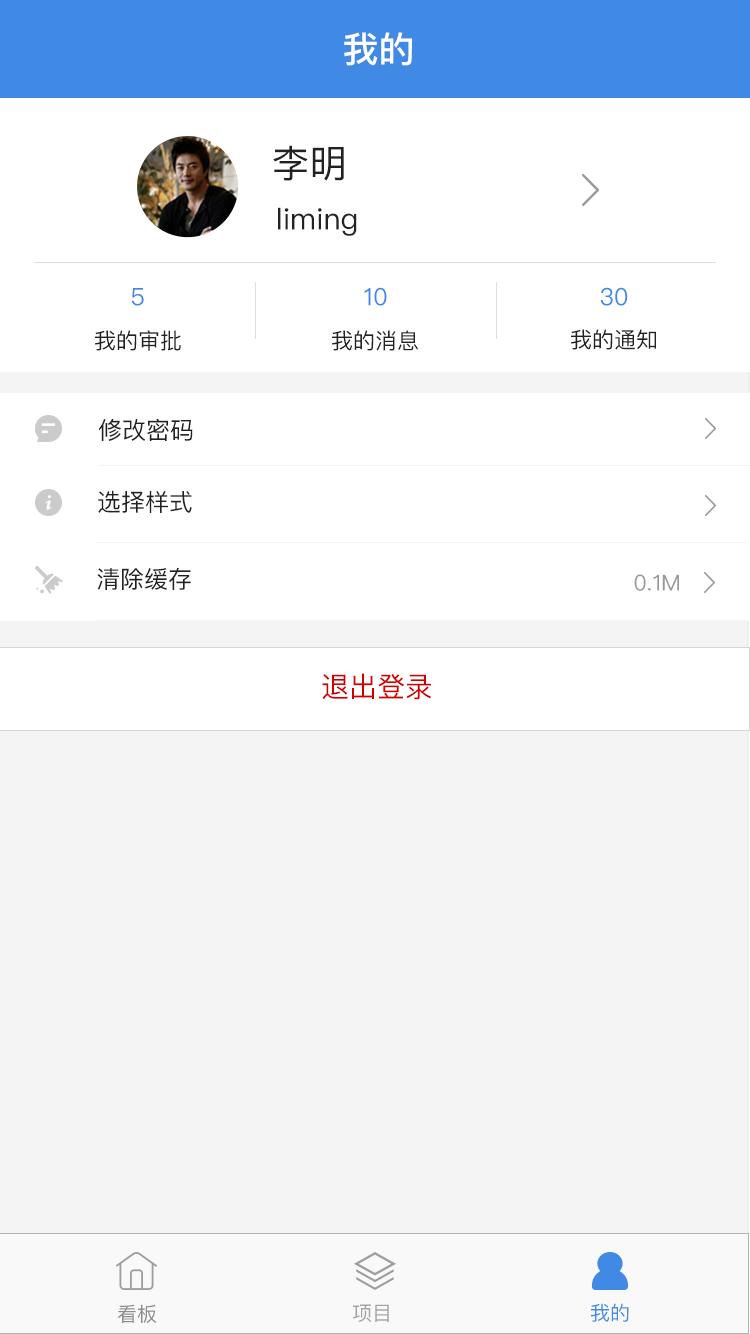
<style>
.page{position:relative;width:750px;height:1334px;background:#ffffff}
.page>*{position:absolute;margin:0}
.t1{font:36px "PingFangSC-Medium";color:#ffffff}
.t2{font:38px "PingFangSC-Regular";color:#222222}
.t3{font:30px "PingFangSC-Regular";color:#222222}
.t4{font:24px "PingFangSC-Regular";color:#4089e5}
.t5{font:22px "PingFangSC-Regular";color:#222222}
.t6{font:24px "PingFangSC-Regular";color:#222222}
.t7{font:22px "PingFangSC-Regular";color:#999999}
.t8{font:28px "PingFangSC-Regular";color:#d10000}
.t9{font:20px "PingFangSC-Regular";color:#8c8c8c}
.t10{font:20px "PingFangSC-Regular";color:#a3a3a3}
.t11{font:20px "PingFangSC-Regular";color:#4089e5}
</style>
<div class="page">
<p class="t1" style="left:344px;top:32px;width:68px;height:34px">我的</p>
<p class="t2" style="left:273px;top:145px;width:71px;height:36px">李明</p>
<p class="t3" style="left:278px;top:207px;width:79px;height:29px">liming</p>
<p class="t4" style="left:131px;top:288px;width:13px;height:18px">5</p>
<p class="t4" style="left:364px;top:287px;width:23px;height:19px">10</p>
<p class="t4" style="left:600px;top:287px;width:28px;height:19px">30</p>
<p class="t5" style="left:571px;top:329px;width:85px;height:21px">我的通知</p>
<p class="t5" style="left:95px;top:330px;width:86px;height:21px">我的审批</p>
<p class="t5" style="left:332px;top:330px;width:86px;height:21px">我的消息</p>
<p class="t6" style="left:98px;top:418px;width:95px;height:23px">修改密码</p>
<p class="t6" style="left:98px;top:490px;width:94px;height:23px">选择样式</p>
<p class="t6" style="left:97px;top:567px;width:94px;height:23px">清除缓存</p>
<p class="t7" style="left:634px;top:574px;width:45px;height:17px">0.1M</p>
<p class="t8" style="left:322px;top:673px;width:109px;height:27px">退出登录</p>
<p class="t9" style="left:117px;top:1304px;width:40px;height:19px">看板</p>
<p class="t10" style="left:353px;top:1304px;width:36px;height:19px">项目</p>
<p class="t11" style="left:591px;top:1303px;width:38px;height:19px">我的</p>
</div>
